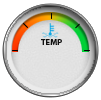
<style>
.page{position:relative;width:101px;height:100px;background:#ffffff}
.page>*{position:absolute;margin:0}
.t1{font:8.3px "MyriadPro-Bold";color:#000000}
</style>
<div class="page">
<p class="t1" style="left:41px;top:39px;width:21px;height:6px">TEMP</p>
</div>
